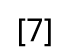
<style>
.page{position:relative;width:70px;height:55px;background:#ffffff}
.page>*{position:absolute;margin:0}
.t1{font:31.8px "DroidSans";color:#000000}
</style>
<div class="page">
<p class="t1" style="left:19px;top:18px;width:32px;height:29px">[7]</p>
</div>
